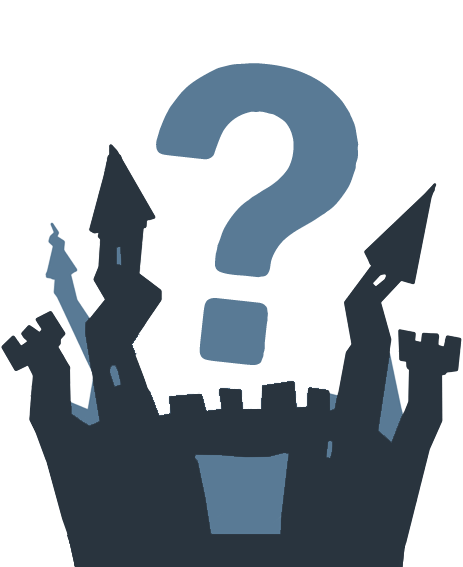
<style>
.page{position:relative;width:463px;height:567px;background:#ffffff}
.page>*{position:absolute;margin:0}
.t1{font:412.5px "AlteHaasGrotesk_Bold";color:#597a95}
</style>
<div class="page">
<p class="t1" style="left:156px;top:63px;width:203px;height:302px;rotate:6deg">?</p>
</div>
